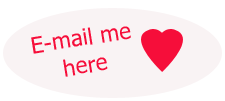
<style>
.page{position:relative;width:225px;height:101px;background:#f9f3f4}
.page>*{position:absolute;margin:0}
.t1{font:22.9px "Tahoma";color:#f60e3a}
</style>
<div class="page">
<p class="t1" style="left:31px;top:26px;width:100px;height:51px;rotate:-9deg">E-mail me here</p>
</div>
